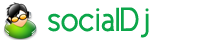
<style>
.page{position:relative;width:205px;height:40px;background:#ffffff}
.page>*{position:absolute;margin:0}
.t1{font:34px "CicleGordita";color:#0ba649}
</style>
<div class="page">
<p class="t1" style="left:48px;top:7px;width:101px;height:31px">socialDj</p>
</div>
